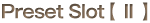
<style>
.page{position:relative;width:150px;height:23px;background:#ffffff}
.page>*{position:absolute;margin:0}
.t1{font:18px "GothicMB101Pro-DeBold";letter-spacing:-0.04em}
</style>
<div class="page">
<p class="t1" style="left:2px;top:2px;width:146px;height:19px">Preset Slot【     】</p>
<p class="t1" style="left:125px;top:4px;width:8px;height:15px">II</p>
</div>
